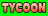
<style>
.page{position:relative;width:48px;height:16px;background:#00ff00}
.page>*{position:absolute;margin:0}
.t1{font:11.7px "Arial-Black";scale:0.79 1}
</style>
<div class="page">
<p class="t1" style="left:2px;top:3px;width:44px;height:9px">TYCOON</p>
</div>
